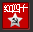
<style>
.page{position:relative;width:33px;height:32px;background:#c50000}
.page>*{position:absolute;margin:0}
.t1{font:10.4px "SimSun";letter-spacing:-0.25em;color:#ffffff}
</style>
<div class="page">
<p class="t1" style="left:4px;top:4px;width:24px;height:9px">红四十</p>
</div>
